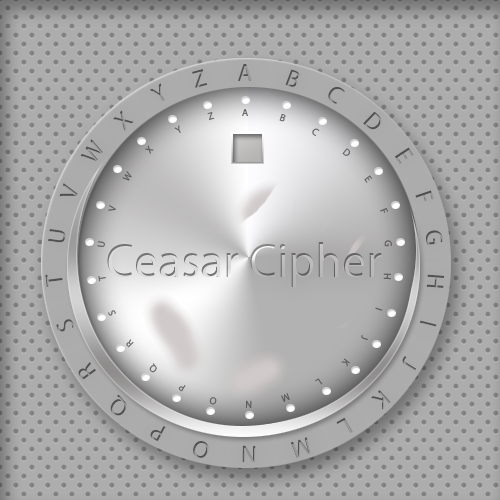
<style>
.page{position:relative;width:500px;height:500px;background:#adadad}
.page>*{position:absolute;margin:0}
.t1{font:24px "MyriadPro-Regular"}
.t2{font:24px "MyriadPro-Regular";color:#505050}
.t3{font:10px "MyriadPro-Regular";color:#676767}
.t4{font:10px "MyriadPro-Regular";color:#6c6c6c}
.t5{font:10px "MyriadPro-Regular";color:#6b6b6b}
.t6{font:10px "MyriadPro-Regular";color:#656565}
.t7{font:10px "MyriadPro-Regular";color:#696969}
.t8{font:10px "MyriadPro-Regular";color:#5f5f5f}
.t9{font:10px "MyriadPro-Regular";color:#606060}
.t10{font:24px "MyriadPro-Regular";color:#5f5f5f}
.t11{font:10px "MyriadPro-Regular";color:#646364}
.t12{font:10px "MyriadPro-Regular";color:#626262}
.t13{font:10px "MyriadPro-Regular";color:#605f60}
.t14{font:10px "MyriadPro-Regular";color:#646363}
.t15{font:48px "MyriadPro-Regular"}
.t16{font:10px "MyriadPro-Regular";color:#5e5e5e}
.t17{font:10px "MyriadPro-Regular"}
.t18{font:10px "MyriadPro-Regular";color:#686868}
.t19{font:10px "MyriadPro-Regular";color:#666565}
.t20{font:10px "MyriadPro-Regular";color:#5f5e5e}
.t21{font:10px "MyriadPro-Regular";color:#5d5d5d}
.t22{font:24px "MyriadPro-Regular";color:#989898}
</style>
<div class="page">
<p class="t1" style="left:238px;top:64px;width:14px;height:17px">A</p>
<p class="t2" style="left:192px;top:69px;width:16px;height:19px;rotate:-15deg">Z</p>
<p class="t1" style="left:285px;top:69px;width:15px;height:18px;rotate:21deg">B</p>
<p class="t1" style="left:150px;top:83px;width:15px;height:19px;rotate:-31deg">Y</p>
<p class="t2" style="left:328px;top:87px;width:17px;height:17px;rotate:34deg">C</p>
<p class="t1" style="left:113px;top:110px;width:21px;height:21px;rotate:-45deg">X</p>
<p class="t3" style="left:207px;top:112px;width:8px;height:8px;rotate:-17deg">Z</p>
<p class="t4" style="left:242px;top:109px;width:6px;height:7px">A</p>
<p class="t5" style="left:279px;top:113px;width:7px;height:9px;rotate:20deg">B</p>
<p class="t2" style="left:363px;top:111px;width:19px;height:19px;rotate:44deg">D</p>
<p class="t6" style="left:174px;top:125px;width:7px;height:8px;rotate:-31deg">Y</p>
<p class="t7" style="left:312px;top:128px;width:8px;height:8px;rotate:33deg">C</p>
<p class="t1" style="left:80px;top:139px;width:23px;height:23px;rotate:-57deg">W</p>
<p class="t8" style="left:145px;top:145px;width:9px;height:9px;rotate:-49deg">X</p>
<p class="t6" style="left:342px;top:148px;width:8px;height:8px;rotate:40deg">D</p>
<p class="t1" style="left:395px;top:147px;width:19px;height:17px;rotate:57deg">E</p>
<p class="t9" style="left:122px;top:171px;width:10px;height:10px;rotate:-56deg">W</p>
<p class="t10" style="left:59px;top:183px;width:19px;height:14px;rotate:-72deg">V</p>
<p class="t11" style="left:364px;top:175px;width:9px;height:8px;rotate:53deg">E</p>
<p class="t1" style="left:415px;top:190px;width:19px;height:12px;rotate:71deg">F</p>
<p class="t12" style="left:108px;top:205px;width:8px;height:6px;rotate:-78deg">V</p>
<p class="t13" style="left:380px;top:208px;width:8px;height:5px;rotate:67deg">F</p>
<p class="t2" style="left:48px;top:229px;width:18px;height:14px;rotate:-82deg">U</p>
<p class="t1" style="left:426px;top:230px;width:17px;height:15px;rotate:81deg">G</p>
<p class="t14" style="left:97px;top:241px;width:8px;height:6px;rotate:-80deg">U</p>
<p class="t15" style="left:107px;top:242px;width:275px;height:45px">Ceasar Cipher</p>
<p class="t8" style="left:384px;top:240px;width:8px;height:7px;rotate:92deg">G</p>
<p class="t1" style="left:45px;top:274px;width:18px;height:13px;rotate:-97deg">T</p>
<p class="t6" style="left:98px;top:276px;width:8px;height:6px;rotate:-100deg">T</p>
<p class="t16" style="left:383px;top:273px;width:8px;height:7px;rotate:92deg">H</p>
<p class="t2" style="left:426px;top:274px;width:19px;height:15px;rotate:94deg">H</p>
<p class="t17" style="left:108px;top:310px;width:8px;height:6px;rotate:-112deg">S</p>
<p class="t16" style="left:375px;top:307px;width:8px;height:4px;rotate:108deg">I</p>
<p class="t1" style="left:56px;top:319px;width:19px;height:13px;rotate:-112deg">S</p>
<p class="t2" style="left:420px;top:320px;width:17px;height:7px;rotate:104deg">I</p>
<p class="t5" style="left:126px;top:339px;width:8px;height:9px;rotate:-135deg">R</p>
<p class="t16" style="left:361px;top:335px;width:7px;height:5px;rotate:108deg">J</p>
<p class="t2" style="left:78px;top:362px;width:18px;height:18px;rotate:-126deg">R</p>
<p class="t18" style="left:149px;top:363px;width:8px;height:10px;rotate:-143deg">Q</p>
<p class="t16" style="left:341px;top:358px;width:9px;height:9px;rotate:129deg">K</p>
<p class="t1" style="left:402px;top:356px;width:14px;height:15px;rotate:121deg">J</p>
<p class="t19" style="left:178px;top:385px;width:8px;height:7px;rotate:-149deg">P</p>
<p class="t20" style="left:315px;top:378px;width:8px;height:7px;rotate:144deg">L</p>
<p class="t1" style="left:371px;top:390px;width:20px;height:20px;rotate:138deg">K</p>
<p class="t1" style="left:110px;top:394px;width:17px;height:22px;rotate:-147deg">Q</p>
<p class="t12" style="left:209px;top:397px;width:8px;height:8px;rotate:-171deg">O</p>
<p class="t16" style="left:246px;top:400px;width:6px;height:8px;rotate:-179deg">N</p>
<p class="t21" style="left:281px;top:393px;width:9px;height:9px;rotate:158deg">M</p>
<p class="t22" style="left:336px;top:417px;width:17px;height:16px;rotate:150deg">L</p>
<p class="t2" style="left:150px;top:426px;width:16px;height:16px;rotate:-152deg">P</p>
<p class="t22" style="left:291px;top:437px;width:20px;height:21px;rotate:162deg">M</p>
<p class="t1" style="left:193px;top:441px;width:16px;height:17px;rotate:-164deg">O</p>
<p class="t1" style="left:242px;top:445px;width:14px;height:18px;rotate:-179deg">N</p>
</div>
